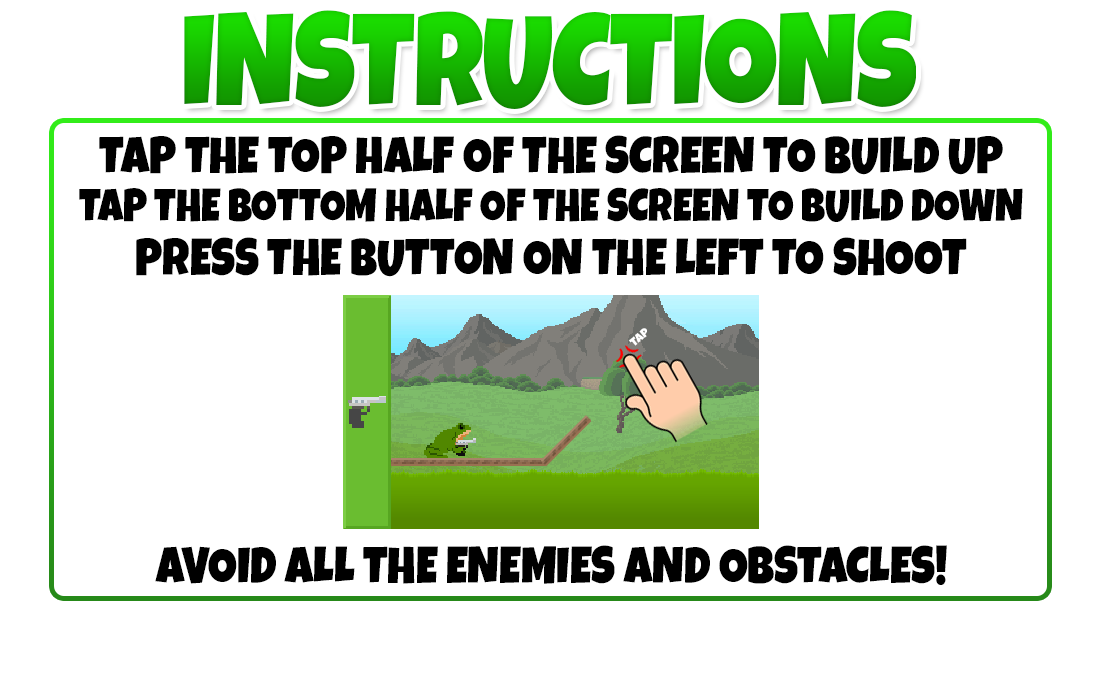
<style>
.page{position:relative;width:1100px;height:700px;background:#ffffff}
.page>*{position:absolute;margin:0}
.t1{font:132.2px "LuckiestGuy-Regular";letter-spacing:-0.01em;text-transform:uppercase;scale:0.87 1}
.t2{font:46px "LuckiestGuy-Regular";color:#000000;text-transform:uppercase;scale:0.87 1}
.t3{font:51.7px "LuckiestGuy-Regular";color:#000000;text-transform:uppercase;scale:0.87 1}
</style>
<div class="page">
<p class="t1" style="left:184px;top:10px;width:732px;height:99px">Instructions</p>
<p class="t2" style="left:79px;top:135px;width:944px;height:142px;text-align:center"><span class="t3">Tap the top half of the screen to build up<br></span>tap the bottom half of the screen to build down<br><span class="t3">press the button on the left to shoot</span></p>
<p class="t3" style="left:155px;top:545px;width:792px;height:40px">avoid all the enemies and obstacles!</p>
</div>
